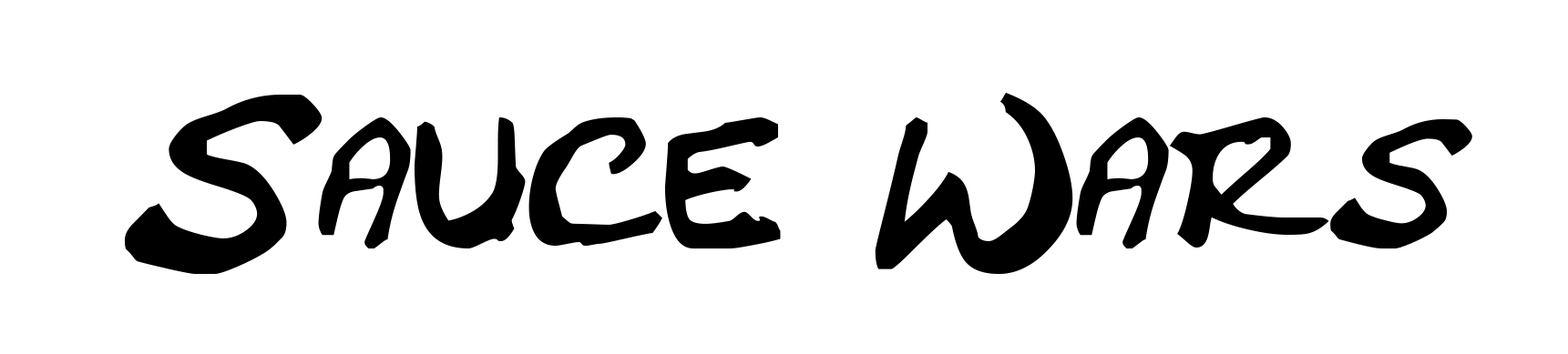
<style>
.page{position:relative;width:1568px;height:354px;background:#ffffff}
.page>*{position:absolute;margin:0}
.t1{font:182.2px "CrackedJohnnie";color:#000000}
</style>
<div class="page">
<p class="t1" style="left:124px;top:93px;width:1348px;height:181px">Sauce Wars</p>
</div>
